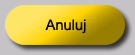
<style>
.page{position:relative;width:135px;height:55px;background:#c6c3c6}
.page>*{position:absolute;margin:0}
.t1{font:14.7px "ArialMT";color:#000000}
</style>
<div class="page">
<p class="t1" style="left:45px;top:19px;width:41px;height:15px">Anuluj</p>
</div>
